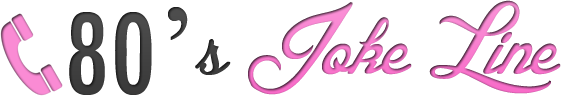
<style>
.page{position:relative;width:563px;height:98px;background:#ffffff}
.page>*{position:absolute;margin:0}
.t1{font:127.9px "BlessedDay";color:#f97dcf}
.t2{font:127.9px "TwCenMT-Condensed";color:#444444}
.t3{font:127.9px "TimesNewRomanPSMT";color:#444444}
.t4{font:127.9px "BlessedDay";color:#444444}
</style>
<div class="page">
<p class="t1" style="left:69px;top:0px;width:492px;height:95px"><span class="t2">80</span><span class="t3">’</span><span class="t4">s </span>Joke Line</p>
</div>
